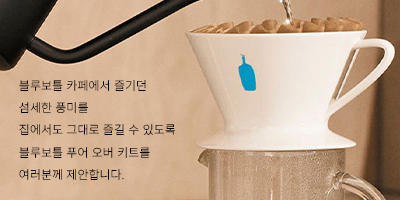
<style>
.page{position:relative;width:400px;height:200px}
.page>*{position:absolute;margin:0}
.t1{font:12px/22.4px "NotoSansKR-Light";color:#000000}
</style>
<div class="page">
<p class="t1" style="left:19px;top:80px;width:157px;height:100px">블루보틀 카페에서 즐기던<br>섬세한 풍미를<br>집에서도 그대로 즐길 수 있도록<br>블루보틀 푸어 오버 키트를<br>여러분께 제안합니다.</p>
</div>
